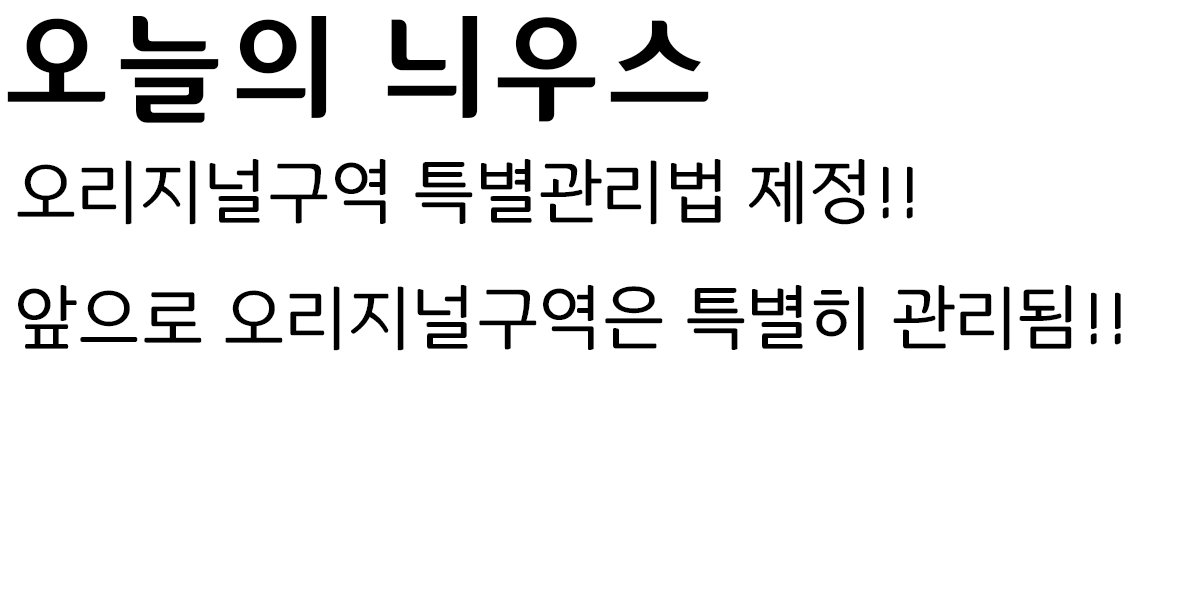
<style>
.page{position:relative;width:1200px;height:613px;background:#ffffff}
.page>*{position:absolute;margin:0}
.t1{font:120px "BCcardB";color:#000000}
.t2{font:72px "BBTreeGR";color:#000000}
</style>
<div class="page">
<p class="t1" style="left:7px;top:16px;width:702px;height:107px">오늘의 늬우스</p>
<p class="t2" style="left:17px;top:159px;width:1104px;height:192px">오리지널구역 특별관리법 제정!!<br>앞으로 오리지널구역은 특별히 관리됨!!</p>
</div>
